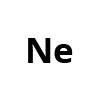
<style>
.page{position:relative;width:100px;height:100px;background:#ffffff}
.page>*{position:absolute;margin:0}
.t1{font:35px "OpenSans-Bold";color:#000000}
</style>
<div class="page">
<p class="t1" style="left:28px;top:38px;width:45px;height:25px">Ne</p>
</div>
